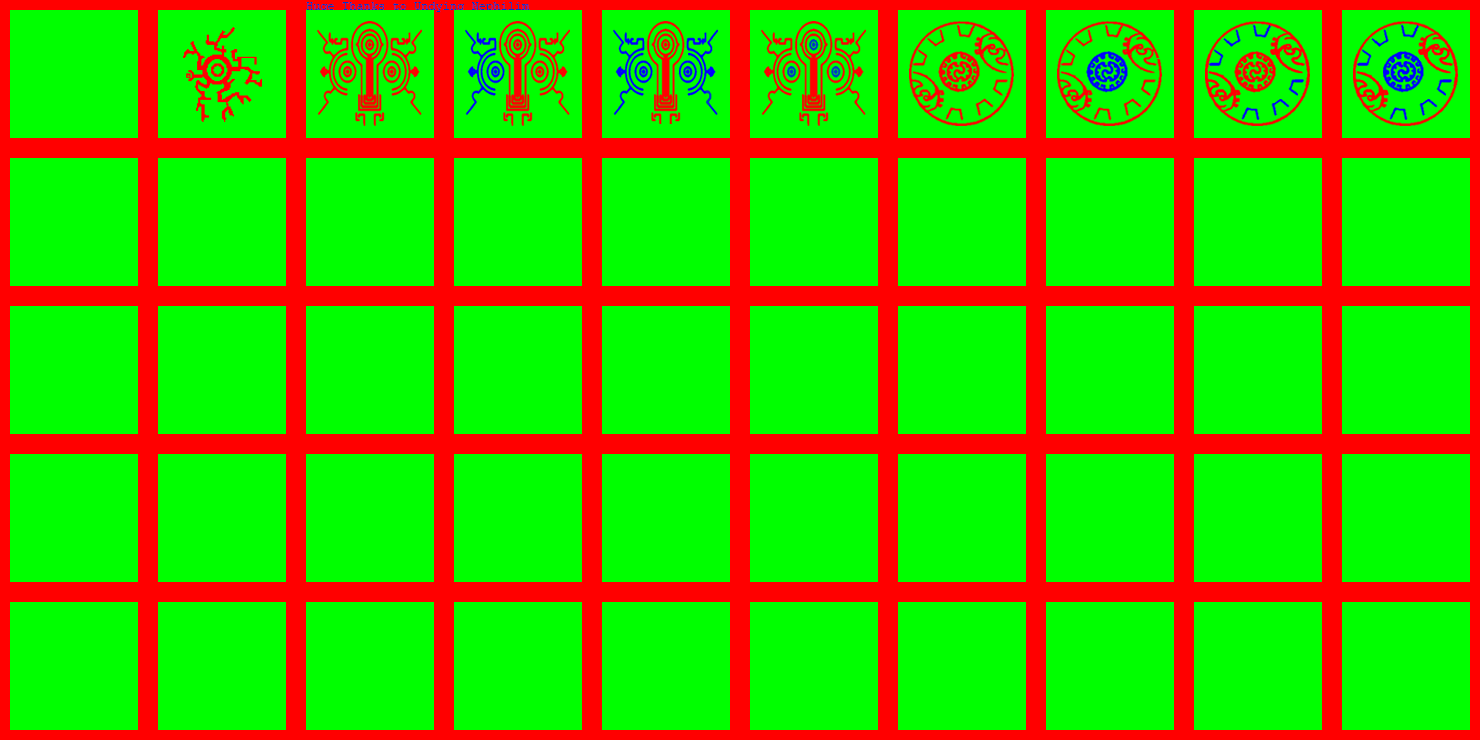
<style>
.page{position:relative;width:1480px;height:740px;background:#00ff00}
.page>*{position:absolute;margin:0}
.t1{font:12px "CourierNewPSMT";color:#0037c8}
</style>
<div class="page">
<p class="t1" style="left:306px;top:2px;width:224px;height:10px">Huge Thanks to Undying Nephilim</p>
</div>
